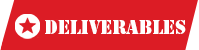
<style>
.page{position:relative;width:199px;height:50px;background:#dc1c25}
.page>*{position:absolute;margin:0}
.t1{font:18px "StencilStd";color:#ffffff}
</style>
<div class="page">
<p class="t1" style="left:45px;top:20px;width:141px;height:14px">DELIVERABLES</p>
</div>
